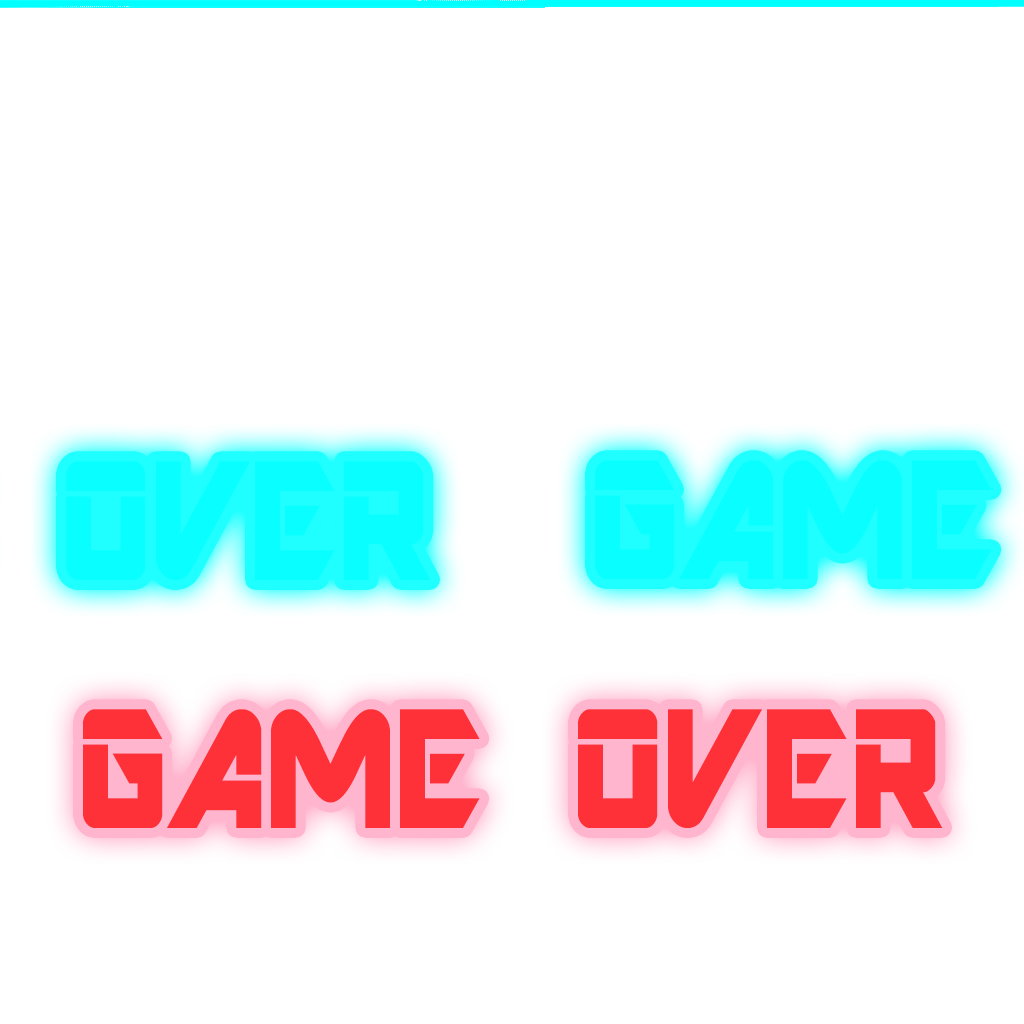
<style>
.page{position:relative;width:1024px;height:1024px;background:#ffffff}
.page>*{position:absolute;margin:0}
.t1{font:188.6px "ARDESTINE";scale:0.83 1}
</style>
<div class="page">
<p class="t1" style="left:82px;top:453px;width:861px;height:119px">GAME OVER</p>
</div>
